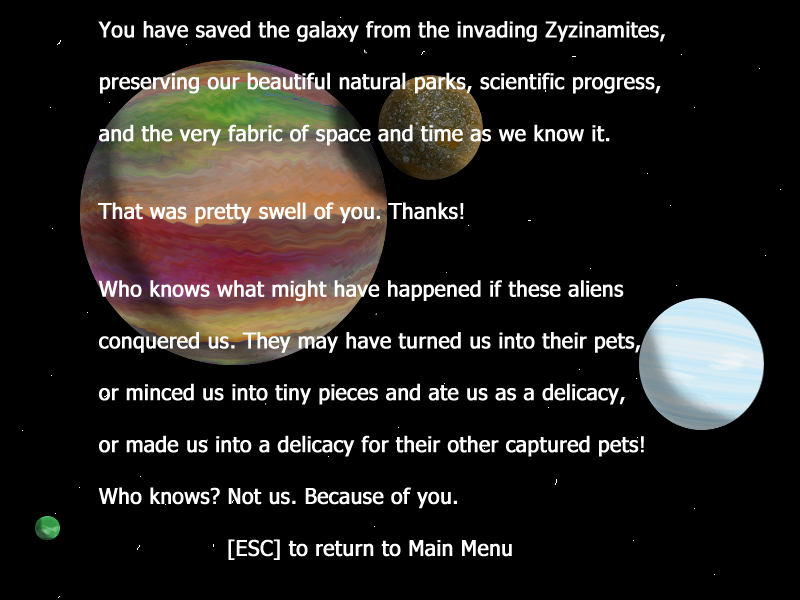
<style>
.page{position:relative;width:800px;height:600px;background:#000000}
.page>*{position:absolute;margin:0}
.t1{font:21.6px "Tahoma";color:#ffffff;font-weight:bold;scale:0.96 1}
</style>
<div class="page">
<p class="t1" style="left:98px;top:21px;width:567px;height:539px">You have saved the galaxy from the invading Zyzinamites,<br><br>preserving our beautiful natural parks, scientific progress,<br><br>and the very fabric of space and time as we know it.<br><br><br>That was pretty swell of you. Thanks!<br><br><br>Who knows what might have happened if these aliens<br><br>conquered us. They may have turned us into their pets,<br><br>or minced us into tiny pieces and ate us as a delicacy,<br><br>or made us into a delicacy for their other captured pets!<br><br>Who knows? Not us. Because of you.<br><br>      [ESC] to return to Main Menu</p>
</div>
